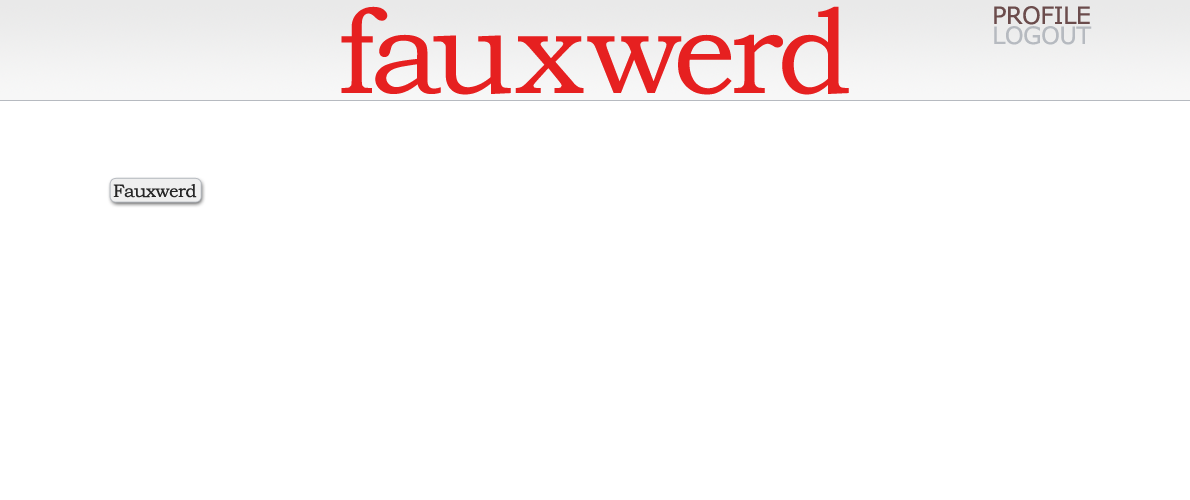
<style>
.page{position:relative;width:1190px;height:500px;background:#ffffff}
.page>*{position:absolute;margin:0}
.t1{font:120px "BookmanOldStyle";letter-spacing:-0.025em;color:#e62020}
.t2{font:24px "Verdana";letter-spacing:-0.025em;color:#6b4c4c}
.t3{font:24px "Verdana";letter-spacing:-0.025em;color:#b6bac0}
.t4{font:18px "BookmanOldStyle";letter-spacing:-0.025em;color:#262626}
</style>
<div class="page">
<p class="t1" style="left:341px;top:6px;width:508px;height:89px">fauxwerd</p>
<p class="t2" style="left:994px;top:6px;width:96px;height:19px">PROFILE</p>
<p class="t3" style="left:994px;top:26px;width:98px;height:19px">LOGOUT</p>
<p class="t4" style="left:113px;top:184px;width:84px;height:14px">Fauxwerd</p>
</div>
